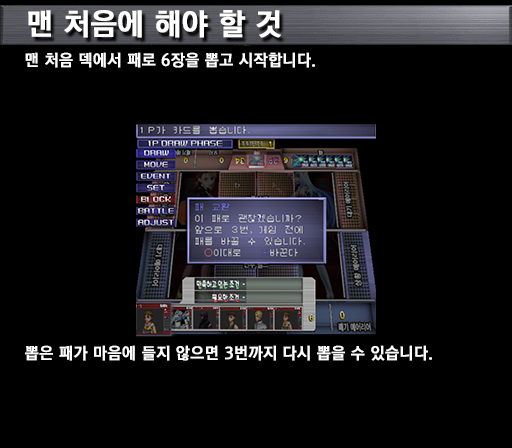
<style>
.page{position:relative;width:512px;height:448px;background:#000000}
.page>*{position:absolute;margin:0}
.t1{font:30px "KoreanGD15-R";color:#ffffff;font-weight:bold}
.t2{font:16px "KoreanGD15-R";color:#ffffff;font-weight:bold}
</style>
<div class="page">
<p class="t1" style="left:28px;top:10px;width:253px;height:28px">맨 처음에 해야 할 것</p>
<p class="t2" style="left:25px;top:52px;width:290px;height:16px">맨 처음 덱에서 패로 6장을 뽑고 시작합니다.</p>
<p class="t2" style="left:25px;top:345px;width:407px;height:16px">뽑은 패가 마음에 들지 않으면 3번까지 다시 뽑을 수 있습니다.</p>
</div>
